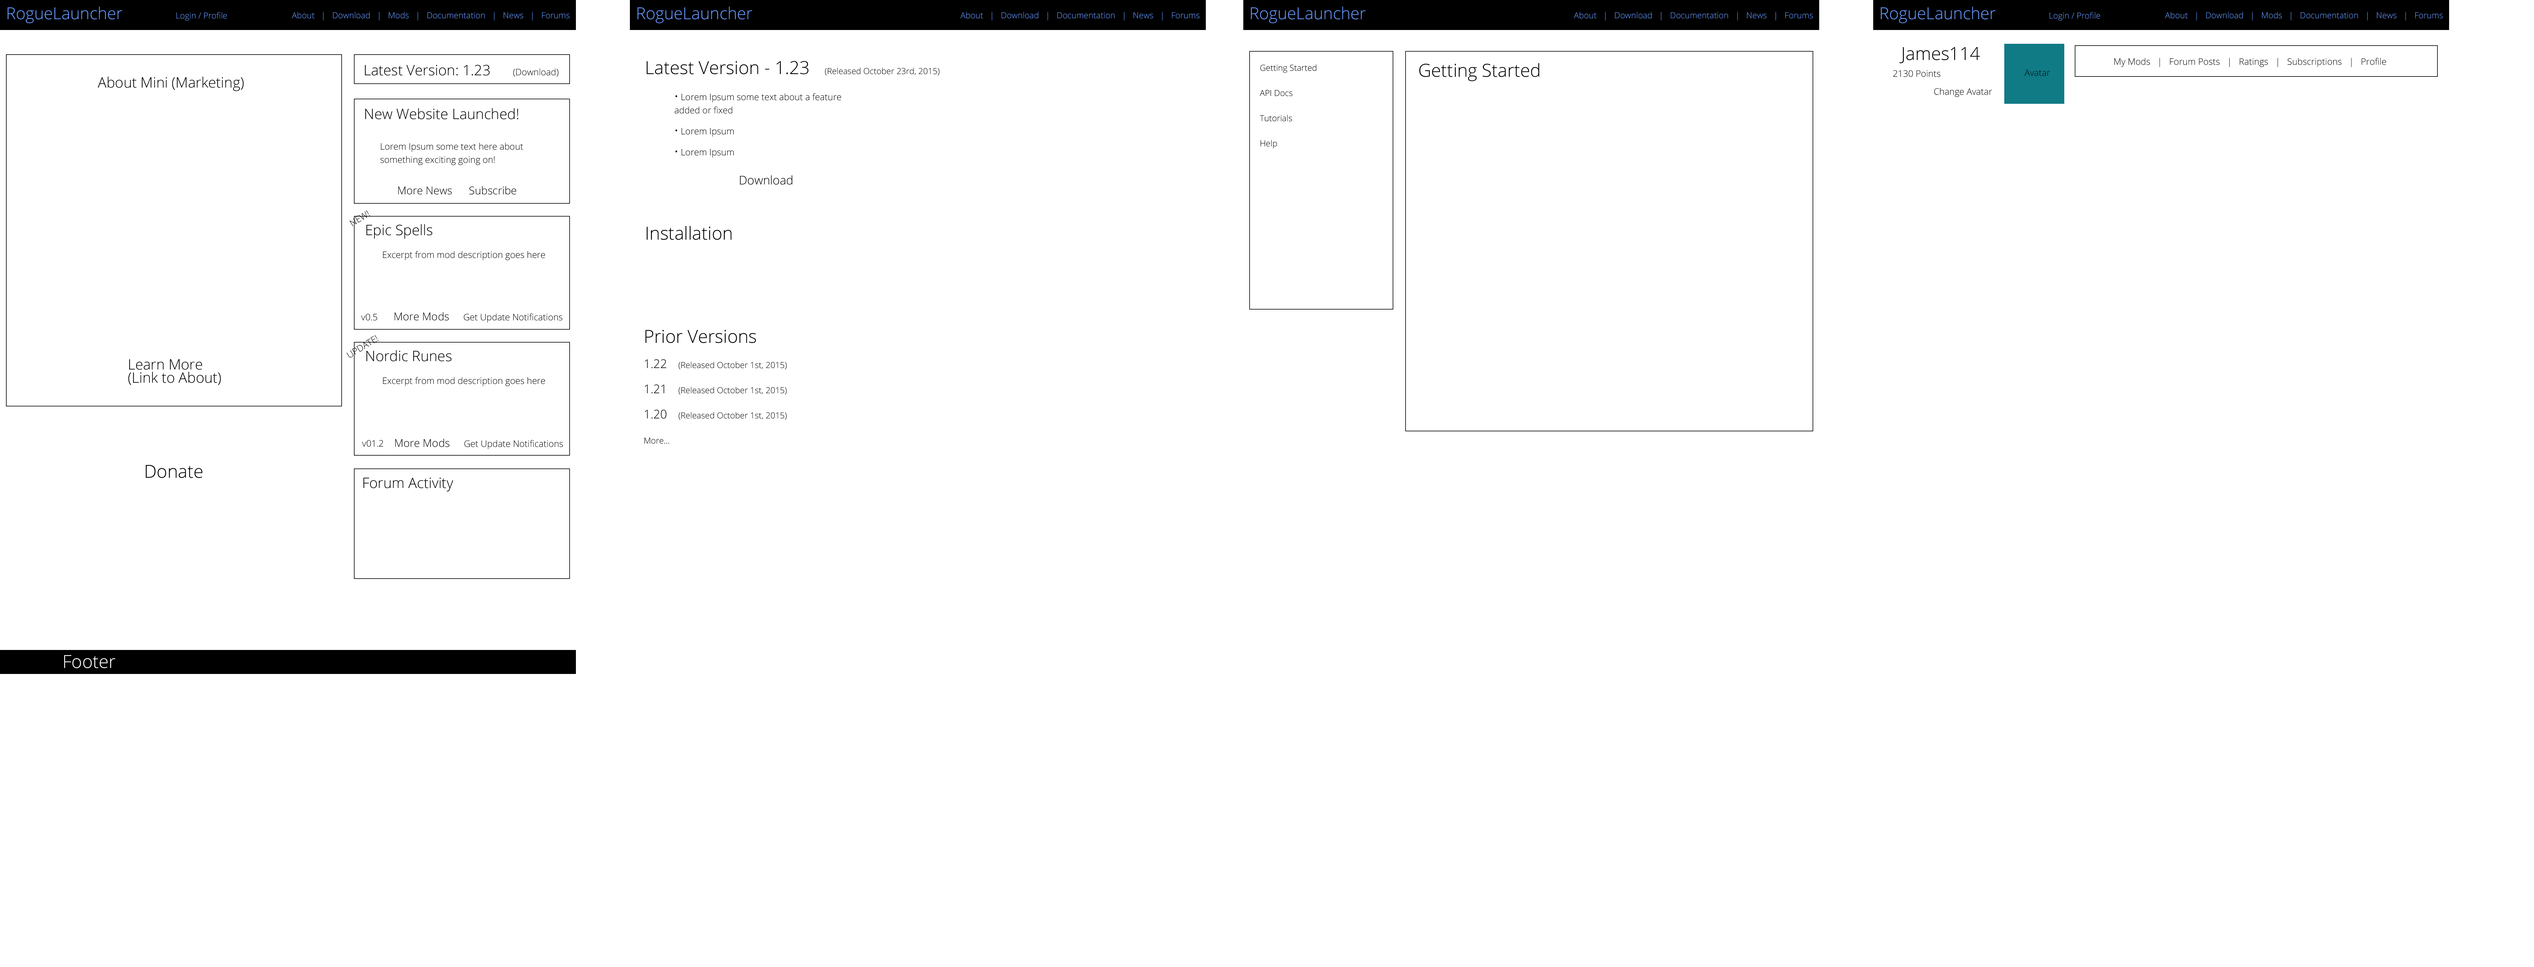
<style>
.page{position:relative;width:2534px;height:967px;background:#ffffff}
.page>*{position:absolute;margin:0}
.t1{font:16.5px "OpenSans-Light";color:#6699ff}
.t2{font:8.4px "OpenSans-Light";color:#6699ff}
.t3{font:18px "OpenSans-Light";color:#000000}
.t4{font:14.4px "OpenSans-Light";color:#000000}
.t5{font:9px "OpenSans-Light";color:#000000}
.t6{font:8.4px "OpenSans-Light";color:#000000}
.t7{font:8.4px/13.2px "OpenSans-Light";color:#000000}
.t8{font:9px/13.2px "OpenSans-Light";color:#000000}
.t9{font:10.8px/13.2px "OpenSans-Light";color:#000000}
.t10{font:9px/18px "OpenSans-Light";color:#000000}
.t11{font:12px "OpenSans-Light";color:#000000}
.t12{font:10.8px "OpenSans-Light";color:#000000}
.t13{font:18px/13.2px "OpenSans-Light";color:#000000}
.t14{font:12px/13.2px "OpenSans-Light";color:#000000}
.t15{font:14.4px/13.2px "OpenSans-Light";color:#000000}
.t16{font:18px "OpenSans-Light";color:#fefefe}
</style>
<div class="page">
<p class="t1" style="left:8px;top:7px;width:114px;height:16px">RogueLauncher</p>
<p class="t2" style="left:176px;top:12px;width:51px;height:9px">Login / Profile</p>
<p class="t2" style="left:292px;top:12px;width:278px;height:8px">About   |   Download   |   Mods   |   Documentation   |   News   |   Forums</p>
<p class="t1" style="left:638px;top:7px;width:114px;height:16px">RogueLauncher</p>
<p class="t2" style="left:961px;top:12px;width:239px;height:8px">About   |   Download   |   Documentation   |   News   |   Forums</p>
<p class="t1" style="left:1251px;top:7px;width:115px;height:16px">RogueLauncher</p>
<p class="t2" style="left:1574px;top:12px;width:239px;height:8px">About   |   Download   |   Documentation   |   News   |   Forums</p>
<p class="t1" style="left:1881px;top:7px;width:115px;height:16px">RogueLauncher</p>
<p class="t2" style="left:2050px;top:12px;width:51px;height:9px">Login / Profile</p>
<p class="t2" style="left:2165px;top:12px;width:278px;height:8px">About   |   Download   |   Mods   |   Documentation   |   News   |   Forums</p>
<p class="t3" style="left:1900px;top:47px;width:80px;height:16px">James114</p>
<p class="t4" style="left:365px;top:65px;width:194px;height:12px">Latest Version: 1.23      <span class="t5">(Download)</span></p>
<p class="t6" style="left:647px;top:61px;width:293px;height:15px"><span class="t3">Latest Version - 1.23    </span>(Released October 23rd, 2015)</p>
<p class="t7" style="left:1260px;top:64px;width:57px;height:84px">Getting Started<br>API Docs<br>Tutorials<br>Help</p>
<p class="t3" style="left:1419px;top:63px;width:121px;height:18px">Getting Started</p>
<p class="t5" style="left:2115px;top:58px;width:271px;height:9px">My Mods   |   Forum Posts   |   Ratings   |   Subscriptions   |   Profile</p>
<p class="t4" style="left:98px;top:76px;width:146px;height:15px">About Mini (Marketing)</p>
<p class="t5" style="left:1893px;top:70px;width:48px;height:7px">2130 Points</p>
<p class="t5" style="left:2025px;top:69px;width:25px;height:7px">Avatar</p>
<p class="t5" style="left:1934px;top:88px;width:59px;height:9px">Change Avatar</p>
<p class="t8" style="left:675px;top:93px;width:166px;height:65px"><span class="t9">•</span> Lorem Ipsum some text about a feature <br>added or fixed<br><span class="t9">• </span><span class="t10">Lorem Ipsum<br></span><span class="t9">• </span><span class="t10">Lorem Ipsum</span></p>
<p class="t4" style="left:365px;top:108px;width:153px;height:11px">New Website Launched!</p>
<p class="t8" style="left:380px;top:143px;width:143px;height:22px">Lorem Ipsum some text here about something exciting going on!</p>
<p class="t11" style="left:740px;top:175px;width:53px;height:10px">Download</p>
<p class="t12" style="left:398px;top:186px;width:118px;height:9px">More News      Subscribe</p>
<p class="t5" style="left:350px;top:210px;width:20px;height:16px;rotate:-32deg">NEW!</p>
<p class="t4" style="left:366px;top:224px;width:66px;height:15px">Epic Spells</p>
<p class="t3" style="left:647px;top:226px;width:85px;height:14px">Installation</p>
<p class="t5" style="left:383px;top:251px;width:162px;height:9px">Excerpt from mod description goes here</p>
<p class="t5" style="left:361px;top:314px;width:16px;height:7px">v0.5</p>
<p class="t5" style="left:394px;top:312px;width:168px;height:11px"><span class="t12">More Mods</span>      Get Update Notifications</p>
<p class="t7" style="left:644px;top:330px;width:143px;height:114px"><span class="t13">Prior Versions<br></span><span class="t14">1.22    </span>(Released October 1st, 2015)<br><span class="t14">1.21    </span>(Released October 1st, 2015)<br><span class="t14">1.20    </span>(Released October 1st, 2015)<br>More...</p>
<p class="t5" style="left:346px;top:335px;width:33px;height:23px;rotate:-32deg">UPDATE!</p>
<p class="t4" style="left:366px;top:350px;width:86px;height:12px">Nordic Runes</p>
<p class="t15" style="left:128px;top:359px;width:93px;height:26px">Learn More<br>(Link to About)</p>
<p class="t5" style="left:383px;top:377px;width:162px;height:9px">Excerpt from mod description goes here</p>
<p class="t5" style="left:362px;top:440px;width:21px;height:7px">v01.2</p>
<p class="t5" style="left:395px;top:439px;width:168px;height:10px"><span class="t12">More Mods</span>      Get Update Notifications</p>
<p class="t3" style="left:146px;top:465px;width:56px;height:13px">Donate</p>
<p class="t4" style="left:363px;top:478px;width:90px;height:14px">Forum Activity</p>
<p class="t16" style="left:64px;top:655px;width:51px;height:13px">Footer</p>
</div>
